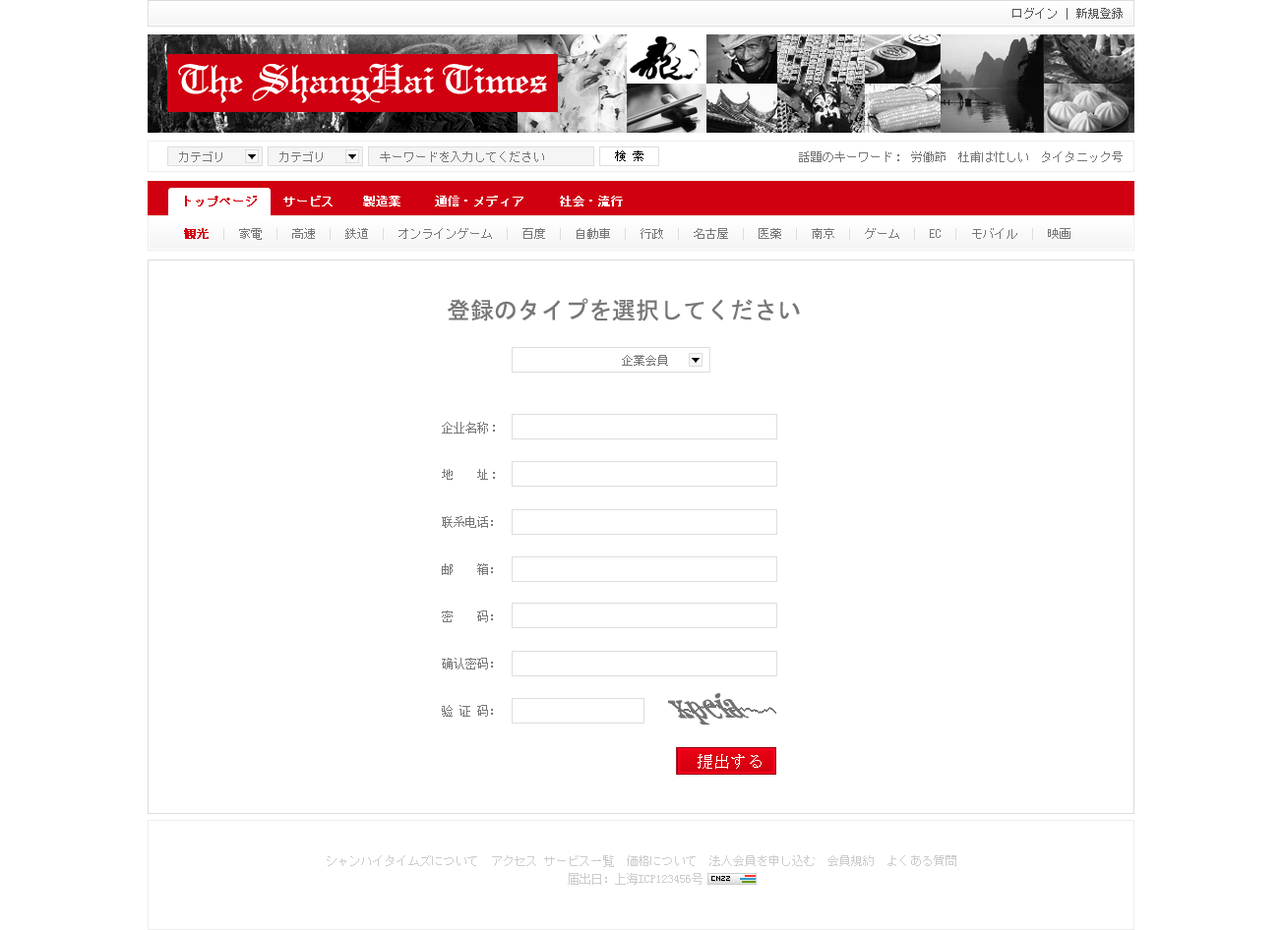
<style>
.page{position:relative;width:1282px;height:930px;background:#ffffff}
.page>*{position:absolute;margin:0}
.t1{font:11.8px "MS-Gothic";color:#555555}
.t2{font:43.8px "OldEnglish";color:#ffffff}
.t3{font:11.8px "MS-Gothic";color:#777777}
.t4{font:11.8px "MS-Mincho";color:#000000}
.t5{font:11.8px "MS-Gothic";color:#d00010;font-weight:bold}
.t6{font:11.8px "MS-Gothic";color:#ffffff;font-weight:bold}
.t7{font:11.8px "MS-Gothic";color:#dddddd}
.t8{font:23.6px "MS-Gothic";color:#777777}
.t9{font:11.8px/47.2px "SimSun";color:#777777}
.t10{font:11.8px/47.2px "MS-Gothic";color:#777777}
.t11{font:16.6px "MS-Mincho";color:#ffffff}
.t12{font:11.8px/17.7px "MS-Gothic";color:#cccccc;text-transform:uppercase}
.t13{font:11.8px/17.7px "SimSun";color:#cccccc;text-transform:uppercase}
</style>
<div class="page">
<p class="t1" style="left:1012px;top:8px;width:110px;height:12px">ログイン | 新規登録</p>
<p class="t2" style="left:178px;top:63px;width:369px;height:41px">The ShangHai Times</p>
<p class="t3" style="left:179px;top:151px;width:43px;height:11px">カテゴリ</p>
<p class="t3" style="left:279px;top:151px;width:44px;height:11px">カテゴリ</p>
<p class="t3" style="left:380px;top:151px;width:164px;height:11px">キーワードを入力してください</p>
<p class="t4" style="left:615px;top:150px;width:28px;height:11px">検 索</p>
<p class="t3" style="left:799px;top:151px;width:323px;height:11px">話題のキーワード： 労働節  杜甫は忙しい  タイタニック号</p>
<p class="t5" style="left:185px;top:196px;width:72px;height:11px">トップページ</p>
<p class="t6" style="left:283px;top:196px;width:49px;height:11px">サービス</p>
<p class="t6" style="left:363px;top:196px;width:37px;height:11px">製造業</p>
<p class="t6" style="left:435px;top:196px;width:88px;height:11px">通信・メディア</p>
<p class="t6" style="left:560px;top:196px;width:63px;height:11px">社会・流行</p>
<p class="t3" style="left:184px;top:228px;width:886px;height:12px"><span class="t5">観光</span><span class="t7">  |  </span>家電<span class="t7">  |  </span>高速<span class="t7">  |  </span>鉄道<span class="t7">  |  </span>オンラインゲーム<span class="t7">  |  </span>百度<span class="t7">  |  </span>自動車<span class="t7">  |  </span>行政<span class="t7">  |  </span>名古屋<span class="t7">  |  </span>医薬<span class="t7">  |  </span>南京<span class="t7">  |  </span>ゲーム<span class="t7">  |  </span>EC<span class="t7">  |  </span>モバイル<span class="t7">  |  </span>映画</p>
<p class="t8" style="left:448px;top:298px;width:352px;height:24px">登録のタイプを選択してください</p>
<p class="t3" style="left:622px;top:355px;width:46px;height:11px">企業会員</p>
<p class="t9" style="left:442px;top:422px;width:53px;height:295px">企业名称<span class="t10">：<br>地    址：<br></span>联<span class="t10">系</span>电话：<br>邮    箱：<br>密    码：<br>确认密码：<br>验 证 码：</p>
<p class="t11" style="left:697px;top:754px;width:64px;height:15px">提出する</p>
<p class="t12" style="left:327px;top:856px;width:629px;height:29px;text-align:center">シャンハイタイムズについて  アクセス サービス一覧  価格について  法人会員を申し込む  会員規約  よくある質問<br><span class="t13">届出日：上海ICP123456号</span></p>
</div>
